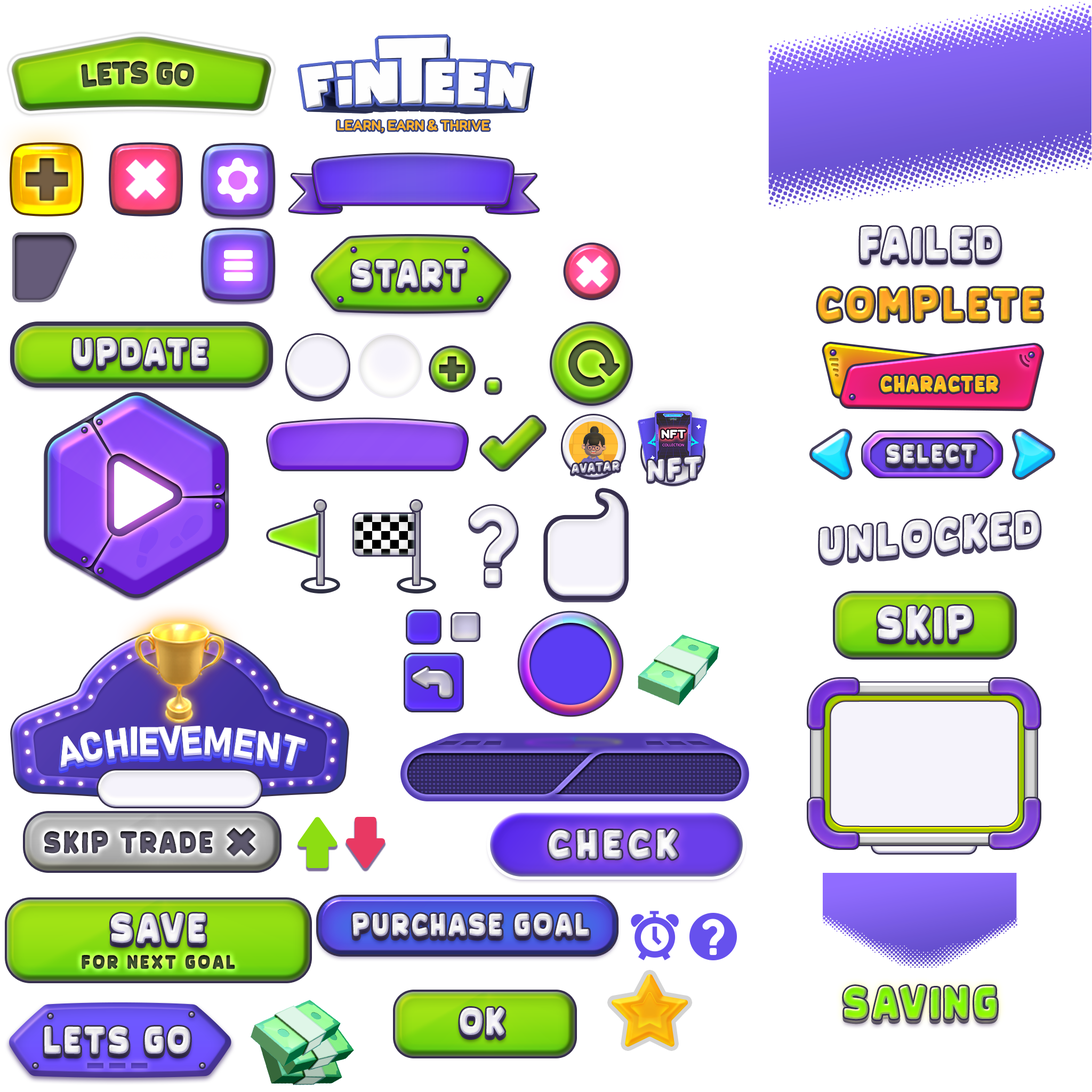
<style>
.page{position:relative;width:1092px;height:1092px;background:#ffffff}
.page>*{position:absolute;margin:0}
.t1{font:30.4px "Planet-Comic";color:#435330;text-transform:uppercase;scale:0.8 1}
.t2{font:43.6px "Planet-Comic";letter-spacing:0.1em;color:#edecee;text-transform:uppercase;scale:0.8 1}
.t3{font:35.9px "Planet-Comic";letter-spacing:0.1em;text-transform:uppercase;scale:0.8 1}
.t4{font:43.6px "Planet-Comic";letter-spacing:0.1em;text-transform:uppercase;scale:0.8 1}
.t5{font:21.3px "Planet-Comic";letter-spacing:0.06em;color:#ffaf31;text-transform:uppercase;scale:0.8 1}
.t6{font:25px "Planet-Comic";letter-spacing:0.1em;text-transform:uppercase;scale:0.8 1}
.t7{font:12px "Planet-Comic";letter-spacing:0.1em;text-transform:uppercase;scale:0.86 1}
.t8{font:28.2px "Planet-Comic";letter-spacing:0.1em;text-transform:uppercase;scale:0.86 1}
.t9{font:43.6px "Planet-Comic";letter-spacing:0.1em;color:#eeedef;text-transform:uppercase;scale:0.8 1}
.t10{font:29.2px "Planet-Comic";letter-spacing:0.1em;color:#4d495a;text-transform:uppercase;scale:0.8 1}
.t11{font:37.6px "Planet-Comic";letter-spacing:0.16em;text-transform:uppercase;scale:0.87 1}
.t12{font:38.8px "Planet-Comic";letter-spacing:0.1em;color:#ecebee;text-transform:uppercase;scale:0.8 1}
.t13{font:29.3px "Planet-Comic";letter-spacing:0.1em;text-transform:uppercase;scale:0.8 1}
.t14{font:18.4px "Planet-Comic";letter-spacing:0.16em;color:#334327;text-transform:uppercase;scale:0.8 1}
.t15{font:35.9px "Planet-Comic";letter-spacing:0.1em;color:#ecebec;text-transform:uppercase;scale:0.8 1}
</style>
<div class="page">
<p class="t1" style="left:81px;top:61px;width:113px;height:26px">Lets GO</p>
<p class="t2" style="left:860px;top:227px;width:141px;height:34px">Failed</p>
<p class="t3" style="left:352px;top:260px;width:114px;height:28px">Start</p>
<p class="t4" style="left:818px;top:287px;width:224px;height:35px">COMPLETE</p>
<p class="t3" style="left:73px;top:338px;width:135px;height:28px">Update</p>
<p class="t5" style="left:880px;top:375px;width:118px;height:17px">CHARACTER</p>
<p class="t6" style="left:886px;top:444px;width:90px;height:20px">Select</p>
<p class="t7" style="left:572px;top:461px;width:48px;height:13px;rotate:-4deg">AVATAR</p>
<p class="t8" style="left:648px;top:456px;width:54px;height:25px;rotate:-4deg">NFT</p>
<p class="t9" style="left:878px;top:606px;width:95px;height:34px">SKIP</p>
<p class="t10" style="left:44px;top:831px;width:169px;height:23px">Skip Trade</p>
<p class="t11" style="left:549px;top:829px;width:129px;height:31px">Check</p>
<p class="t12" style="left:111px;top:913px;width:95px;height:30px">Save</p>
<p class="t13" style="left:352px;top:913px;width:237px;height:23px">Purchase goal</p>
<p class="t14" style="left:82px;top:954px;width:153px;height:15px">For Next Goal</p>
<p class="t4" style="left:844px;top:985px;width:153px;height:35px">Saving</p>
<p class="t15" style="left:460px;top:1007px;width:45px;height:29px">OK</p>
<p class="t3" style="left:44px;top:1026px;width:146px;height:28px">Lets Go</p>
</div>
